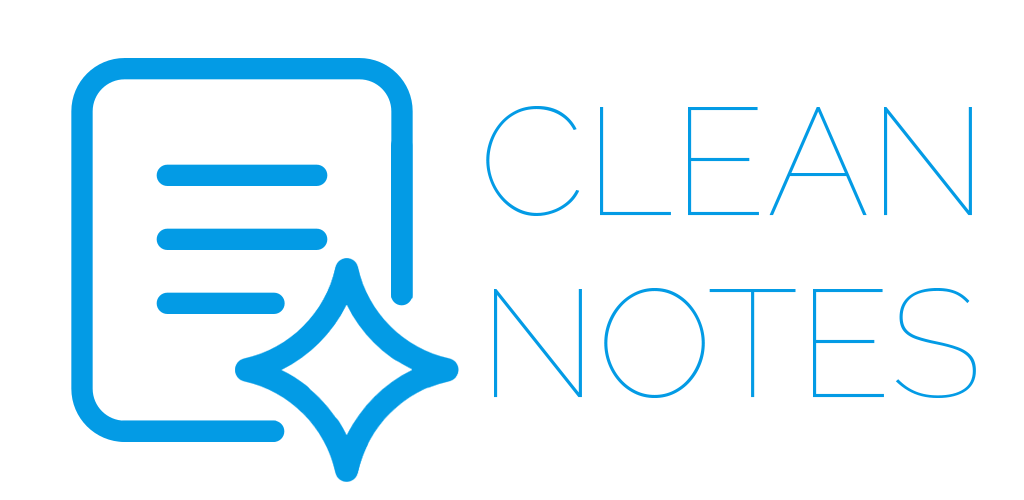
<style>
.page{position:relative;width:1024px;height:500px;background:#ffffff}
.page>*{position:absolute;margin:0}
.t1{font:152px "Raleway-Thin";color:#039be5}
</style>
<div class="page">
<p class="t1" style="left:486px;top:106px;width:490px;height:292px">CLEAN<br>NOTES</p>
</div>
